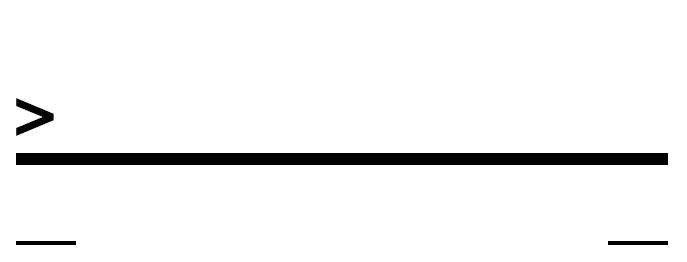
<style>
.page{position:relative;width:687px;height:262px;background:#ffffff}
.page>*{position:absolute;margin:0}
.t1{font:60px "Tahoma-Bold";color:#020202}
</style>
<div class="page">
<p class="t1" style="left:16px;top:98px;width:38px;height:38px">&gt;</p>
</div>
